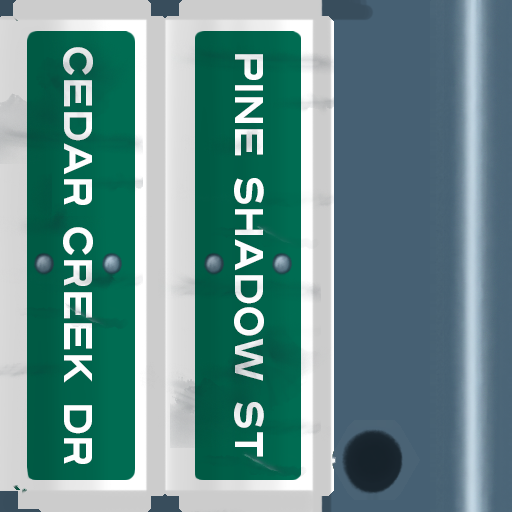
<style>
.page{position:relative;width:512px;height:512px}
.page>*{position:absolute;margin:0}
.t1{font:40px "Turnpike";color:#fefeff;scale:0.75 1}
</style>
<div class="page">
<p class="t1" style="left:63px;top:47px;width:30px;height:417px;rotate:90deg">Cedar Creek Dr</p>
<p class="t1" style="left:234px;top:54px;width:30px;height:403px;rotate:90deg">Pine Shadow St</p>
</div>
